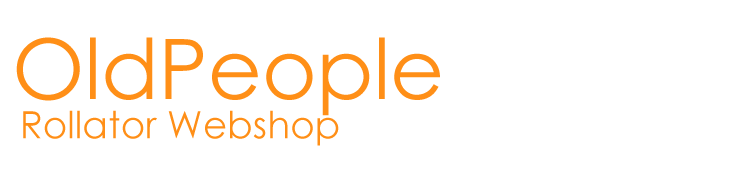
<style>
.page{position:relative;width:750px;height:178px;background:#ffffff}
.page>*{position:absolute;margin:0}
.t1{font:83.4px "CenturyGothic";color:#ff8f17}
.t2{font:37.5px "CenturyGothic";color:#ff8f17}
</style>
<div class="page">
<p class="t1" style="left:16px;top:37px;width:424px;height:79px">OldPeople</p>
<p class="t2" style="left:23px;top:110px;width:316px;height:36px">Rollator Webshop</p>
</div>
